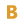
<style>
.page{position:relative;width:24px;height:24px;background:#ffffff}
.page>*{position:absolute;margin:0}
.t1{font:19px "MicrosoftTaiLe-Bold";color:#dc9b2a}
</style>
<div class="page">
<p class="t1" style="left:7px;top:5px;width:11px;height:14px">B</p>
</div>
